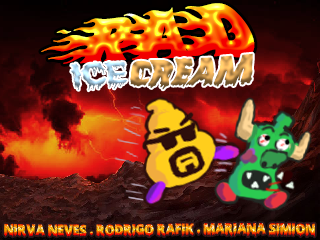
<style>
.page{position:relative;width:320px;height:240px}
.page>*{position:absolute;margin:0}
.t1{font:70px "Blazed";letter-spacing:-0.38em;scale:0.84 1}
.t2{font:14px "ScaryHalloweenFont-Bold";scale:0.86 1}
</style>
<div class="page">
<p class="t1" style="left:41px;top:3px;width:214px;height:61px;rotate:-3deg">RAD</p>
<p class="t2" style="left:4px;top:222px;width:311px;height:15px">Nirva Neves . Rodrigo Rafik . Mariana Simion</p>
</div>
